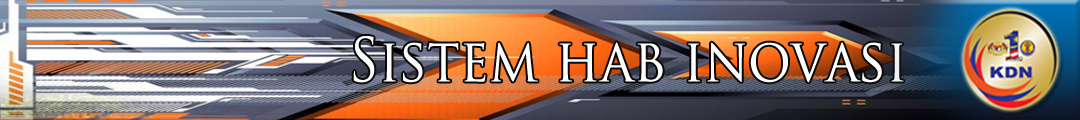
<style>
.page{position:relative;width:1080px;height:120px}
.page>*{position:absolute;margin:0}
.t1{font:59px "TrajanPro-Regular";color:#fefefe;scale:0.9 1}
</style>
<div class="page">
<p class="t1" style="left:353px;top:36px;width:551px;height:47px">Sistem hab inovasi</p>
</div>
